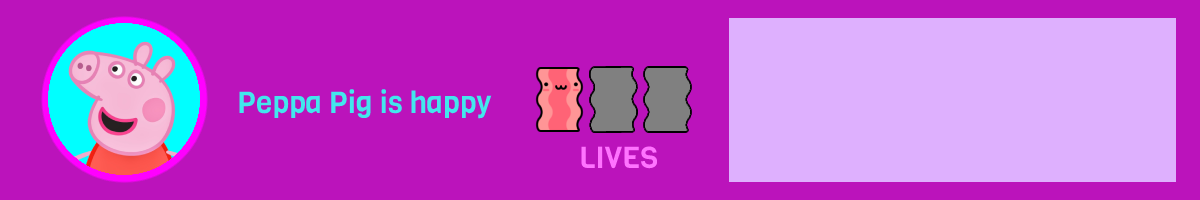
<style>
.page{position:relative;width:1200px;height:200px;background:#bb13bb}
.page>*{position:absolute;margin:0}
.t1{font:30px "Viga-Regular";color:#42e7ed}
.t2{font:30px "Viga-Regular";color:#ff73ff}
</style>
<div class="page">
<p class="t1" style="left:239px;top:89px;width:253px;height:30px">Peppa Pig is happy</p>
<p class="t2" style="left:581px;top:146px;width:77px;height:23px">LIVES</p>
</div>
